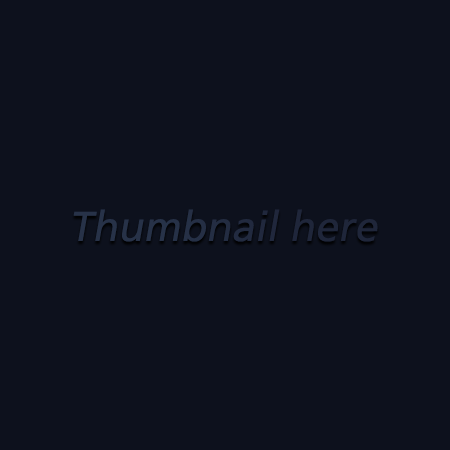
<style>
.page{position:relative;width:450px;height:450px;background:#0d111d}
.page>*{position:absolute;margin:0}
.t1{font:41.7px "AGForeignerRomanMedium";color:#21283e;font-style:italic}
</style>
<div class="page">
<p class="t1" style="left:73px;top:209px;width:305px;height:33px">Thumbnail here</p>
</div>
